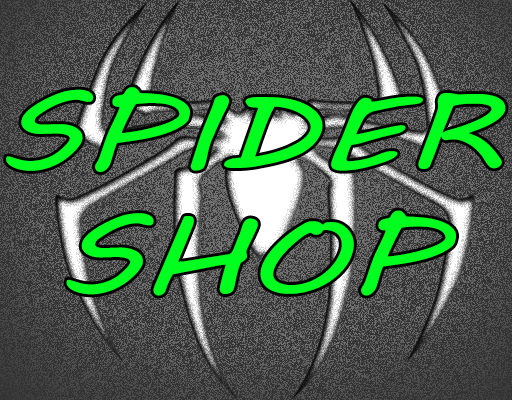
<style>
.page{position:relative;width:512px;height:400px;background:#333333}
.page>*{position:absolute;margin:0}
.t1{font:101.7px "MVBoli";color:#00ff1e;scale:1.4 1}
</style>
<div class="page">
<p class="t1" style="left:6px;top:87px;width:500px;height:209px;text-align:center">SPIDER<br>SHOP</p>
</div>
